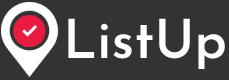
<style>
.page{position:relative;width:229px;height:80px;background:#333333}
.page>*{position:absolute;margin:0}
.t1{font:54px "JosefinSans-SemiBold";color:#ffffff}
</style>
<div class="page">
<p class="t1" style="left:68px;top:18px;width:157px;height:51px">ListUp</p>
</div>
